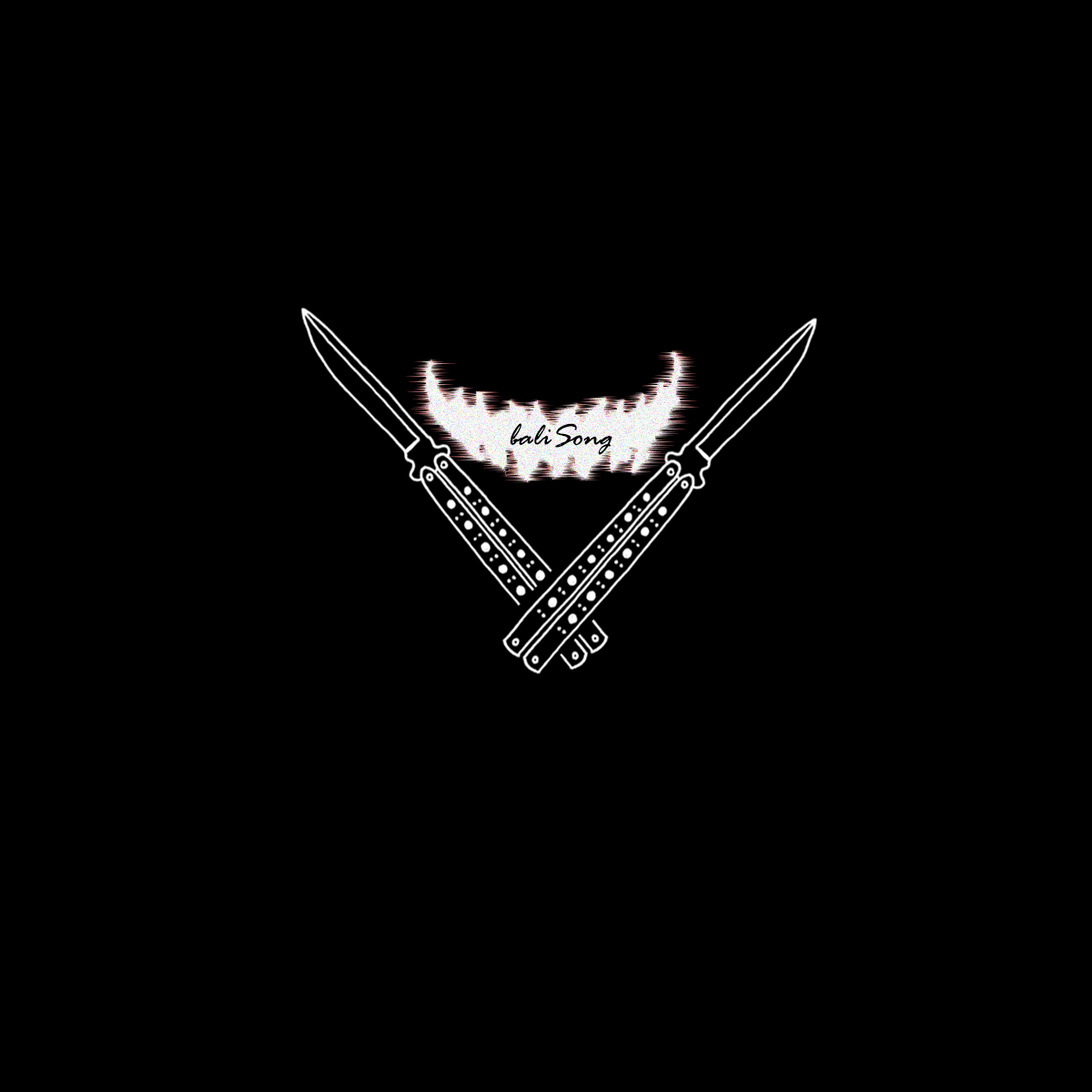
<style>
.page{position:relative;width:1092px;height:1092px;background:#000000}
.page>*{position:absolute;margin:0}
.t1{font:32.8px "RageItalic";color:#000000}
</style>
<div class="page">
<p class="t1" style="left:510px;top:423px;width:102px;height:32px">baliSong</p>
</div>
